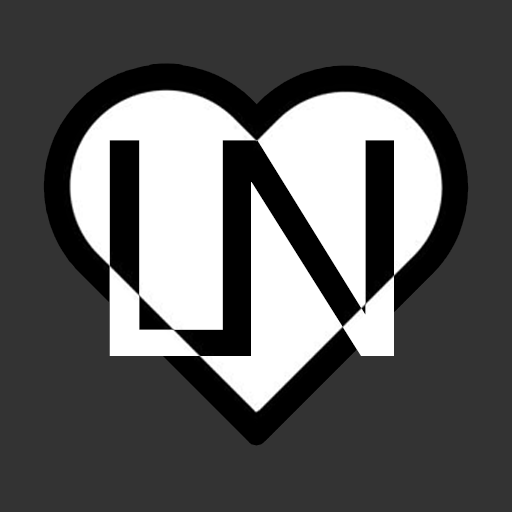
<style>
.page{position:relative;width:512px;height:512px;background:#333333}
.page>*{position:absolute;margin:0}
.t1{font:300px "Helvetica";letter-spacing:-0.18em;color:#000000}
</style>
<div class="page">
<p class="t1" style="left:109px;top:140px;width:285px;height:216px">LN</p>
</div>
